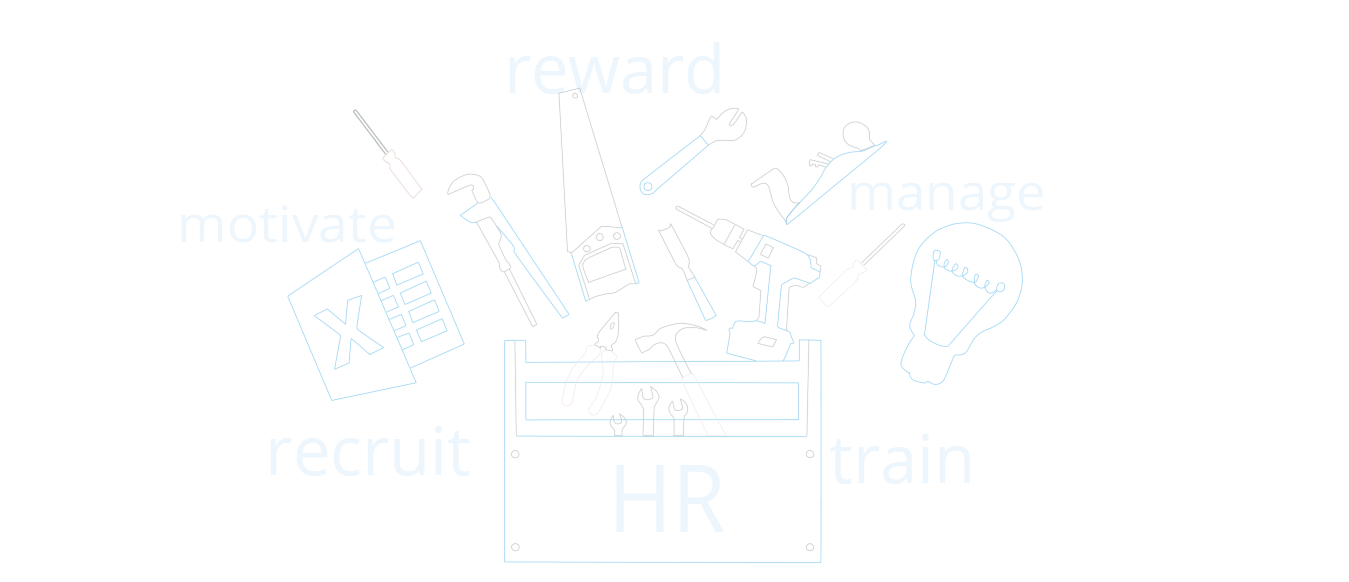
<style>
.page{position:relative;width:1349px;height:582px;background:#ffffff}
.page>*{position:absolute;margin:0}
.t1{font:66.7px "OpenSans";color:#edf6fc}
.t2{font:50.2px "OpenSans";color:#edf6fc;scale:1.05 1}
.t3{font:50.2px "OpenSans";color:#edf6fc;scale:1.06 1}
.t4{font:94.1px "OpenSans";color:#edf6fc;scale:0.92 1}
</style>
<div class="page">
<p class="t1" style="left:509px;top:42px;width:211px;height:52px">reward</p>
<p class="t2" style="left:851px;top:182px;width:192px;height:40px">manage</p>
<p class="t3" style="left:181px;top:205px;width:213px;height:38px">motivate</p>
<p class="t1" style="left:270px;top:425px;width:200px;height:51px">recruit</p>
<p class="t1" style="left:830px;top:433px;width:140px;height:51px">train</p>
<p class="t4" style="left:616px;top:465px;width:108px;height:67px">HR</p>
</div>
